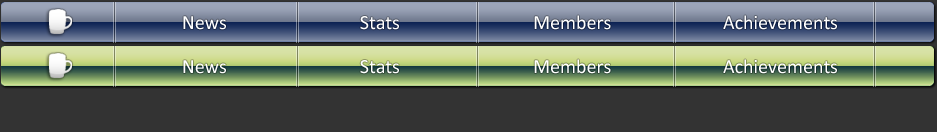
<style>
.page{position:relative;width:937px;height:132px;background:#333333}
.page>*{position:absolute;margin:0}
.t1{font:20px "Calibri";color:#ffffff}
</style>
<div class="page">
<p class="t1" style="left:183px;top:16px;width:43px;height:14px">News</p>
<p class="t1" style="left:360px;top:16px;width:39px;height:14px">Stats</p>
<p class="t1" style="left:534px;top:15px;width:77px;height:15px">Members</p>
<p class="t1" style="left:723px;top:15px;width:114px;height:15px">Achievements</p>
<p class="t1" style="left:183px;top:60px;width:43px;height:14px">News</p>
<p class="t1" style="left:360px;top:60px;width:39px;height:14px">Stats</p>
<p class="t1" style="left:534px;top:59px;width:77px;height:15px">Members</p>
<p class="t1" style="left:723px;top:59px;width:114px;height:15px">Achievements</p>
</div>
